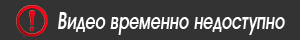
<style>
.page{position:relative;width:300px;height:40px;background:#333333}
.page>*{position:absolute;margin:0}
.t1{font:23.1px "AAvanteLtDemiBoldItalic";color:#ffffff;scale:0.73 1}
</style>
<div class="page">
<p class="t1" style="left:58px;top:12px;width:227px;height:23px">Видео временно недоступно</p>
</div>
